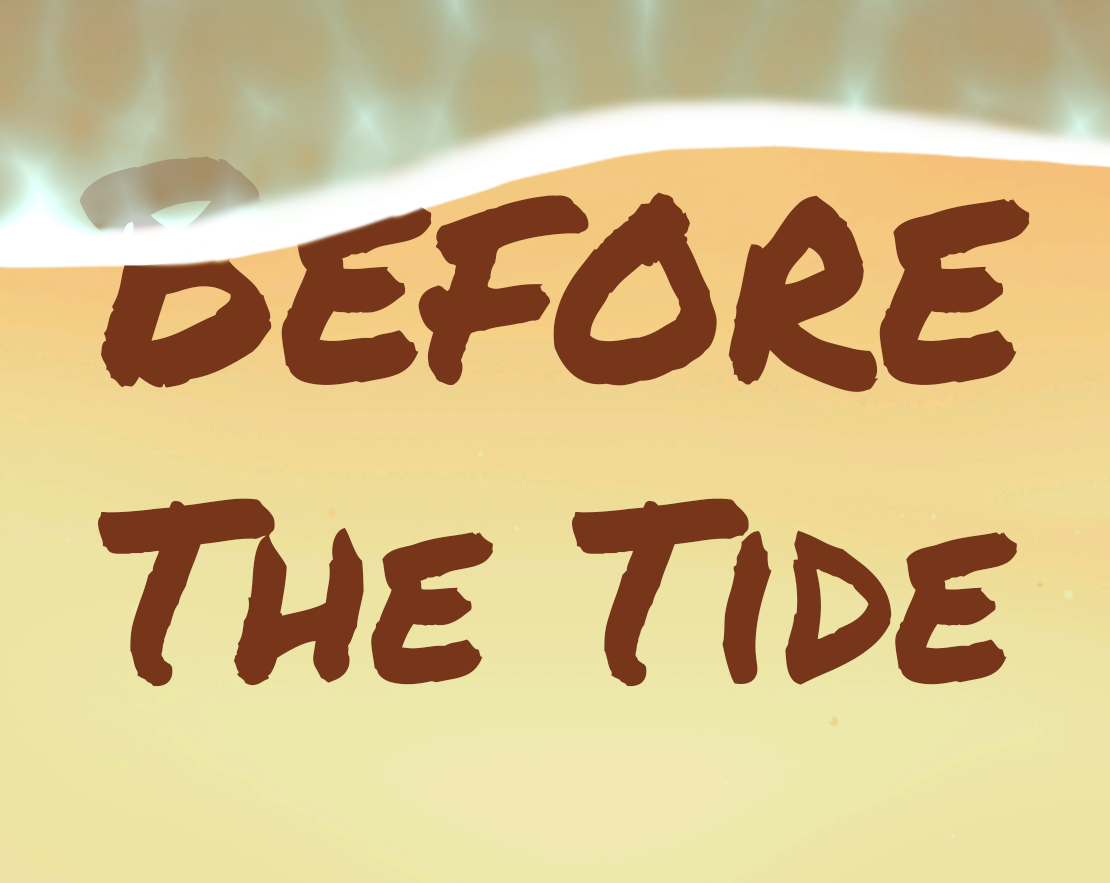
<style>
.page{position:relative;width:1110px;height:883px}
.page>*{position:absolute;margin:0}
.t1{font:250px "PermanentMarker-Regular";color:#77361a;scale:0.91 1}
.t2{font:306.3px "PermanentMarker-Regular";color:#77361a;scale:0.91 1}
</style>
<div class="page">
<p class="t1" style="left:79px;top:156px;width:951px;height:531px;text-align:center"><span class="t2">Before<br></span>The Tide</p>
</div>
